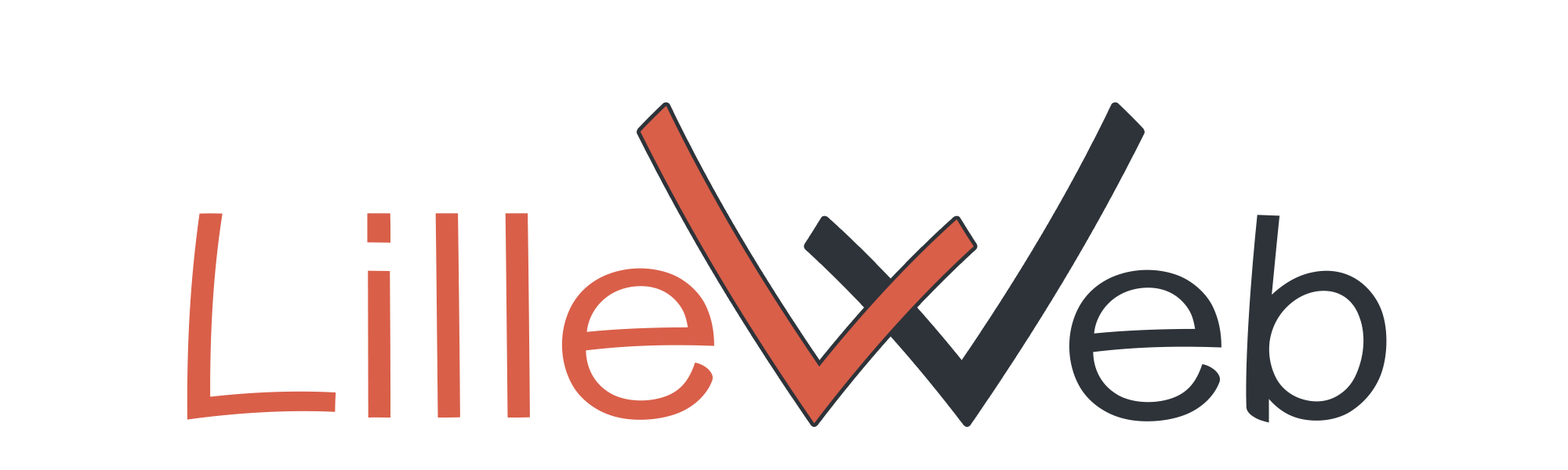
<style>
.page{position:relative;width:1568px;height:470px;background:#ffffff}
.page>*{position:absolute;margin:0}
.t1{font:454.5px "YuppyTC-Regular";color:#d95f49;font-style:italic;scale:1.1 1}
.t2{font:454.5px "YuppyTC-Regular";color:#2d3339;font-style:italic;scale:1.1 1}
.t3{font:284.6px "YuppyTC-Regular";color:#d95f49;scale:1.1 1}
.t4{font:284.6px "YuppyTC-Regular";color:#2d3339;scale:1.1 1}
</style>
<div class="page">
<p class="t1" style="left:640px;top:106px;width:334px;height:318px;rotate:-45deg">L</p>
<p class="t2" style="left:808px;top:106px;width:334px;height:318px;rotate:-135deg">L</p>
<p class="t3" style="left:187px;top:213px;width:527px;height:207px">Lille</p>
<p class="t4" style="left:1069px;top:215px;width:318px;height:208px">eb</p>
</div>
